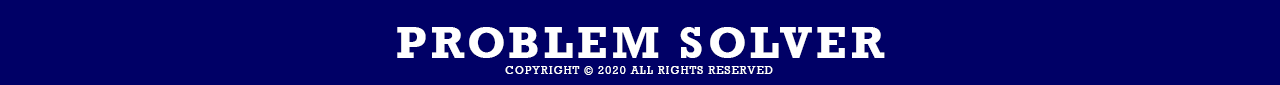
<style>
.page{position:relative;width:1280px;height:85px;background:#000066}
.page>*{position:absolute;margin:0}
.t1{font:41.7px "Rockwell-Bold";letter-spacing:0.11em;color:#ffffff;text-transform:uppercase}
.t2{font:11.1px "Rockwell";letter-spacing:0.11em;color:#ffffff;text-transform:uppercase}
</style>
<div class="page">
<p class="t1" style="left:397px;top:27px;width:488px;height:31px">Problem Solver</p>
<p class="t2" style="left:505px;top:66px;width:268px;height:9px">copyright © 2020 All Rights Reserved</p>
</div>
